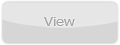
<style>
.page{position:relative;width:120px;height:45px;background:#e6e6e6}
.page>*{position:absolute;margin:0}
.t1{font:12px "Tahoma";color:#8e8e8e;scale:1.24 1}
</style>
<div class="page">
<p class="t1" style="left:44px;top:17px;width:31px;height:9px">View</p>
</div>
